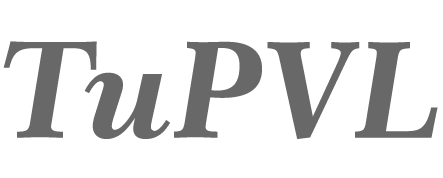
<style>
.page{position:relative;width:443px;height:178px;background:#ffffff}
.page>*{position:absolute;margin:0}
.t1{font:133.3px "Century751BT-BoldItalicB";letter-spacing:0.01em;color:#686868}
</style>
<div class="page">
<p class="t1" style="left:3px;top:41px;width:435px;height:98px">TuPVL</p>
</div>
